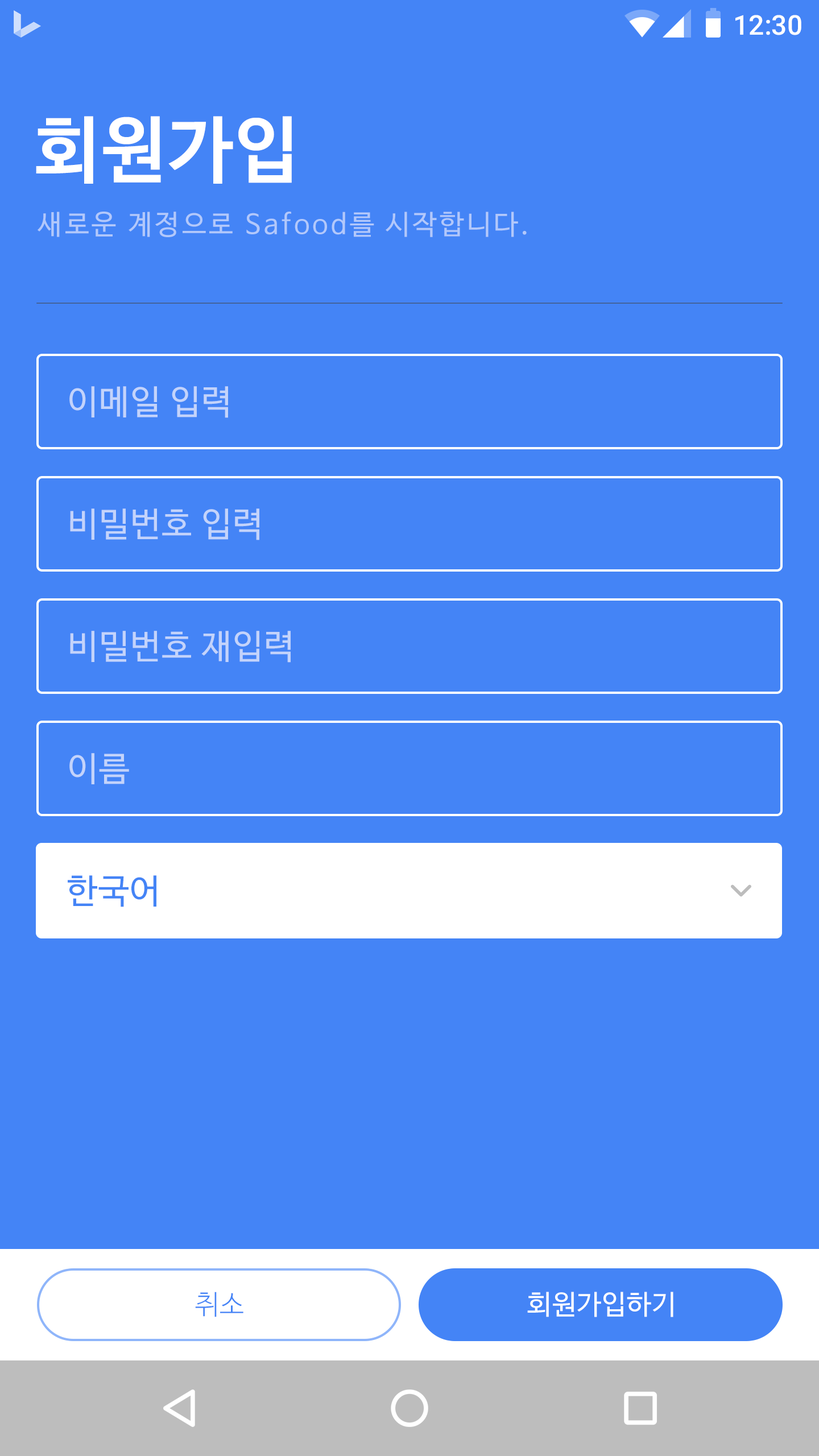
<style>
.page{position:relative;width:819px;height:1456px;background:#4484f6}
.page>*{position:absolute;margin:0}
.t1{font:27.3px "Roboto-Medium";color:#ffffff}
.t2{font:72.8px "NanumBarunGothicBold";letter-spacing:0.025em;color:#ffffff}
.t3{font:27.3px "NanumBarunGothic";letter-spacing:0.1em;color:#b2c8fb}
.t4{font:34.1px "NanumBarunGothic";letter-spacing:0.025em;color:#c3d3fb}
.t5{font:34.1px "NanumBarunGothic";letter-spacing:0.025em;color:#4484f6}
.t6{font:27.3px "NanumBarunGothicLight";letter-spacing:0.025em;color:#4484f6}
.t7{font:27.3px "NanumBarunGothic";letter-spacing:0.025em;color:#ffffff}
</style>
<div class="page">
<p class="t1" style="left:735px;top:15px;width:66px;height:20px">12:30</p>
<p class="t2" style="left:36px;top:116px;width:256px;height:68px">회원가입</p>
<p class="t3" style="left:38px;top:212px;width:489px;height:25px">새로운 계정으로 Safood를 시작합니다.</p>
<p class="t4" style="left:69px;top:386px;width:159px;height:32px">이메일 입력</p>
<p class="t4" style="left:70px;top:508px;width:189px;height:32px">비밀번호 입력</p>
<p class="t4" style="left:70px;top:631px;width:221px;height:32px">비밀번호 재입력</p>
<p class="t4" style="left:69px;top:753px;width:60px;height:31px">이름</p>
<p class="t5" style="left:68px;top:875px;width:88px;height:32px">한국어</p>
<p class="t6" style="left:195px;top:1292px;width:48px;height:25px">취소</p>
<p class="t7" style="left:527px;top:1292px;width:146px;height:25px">회원가입하기</p>
</div>
